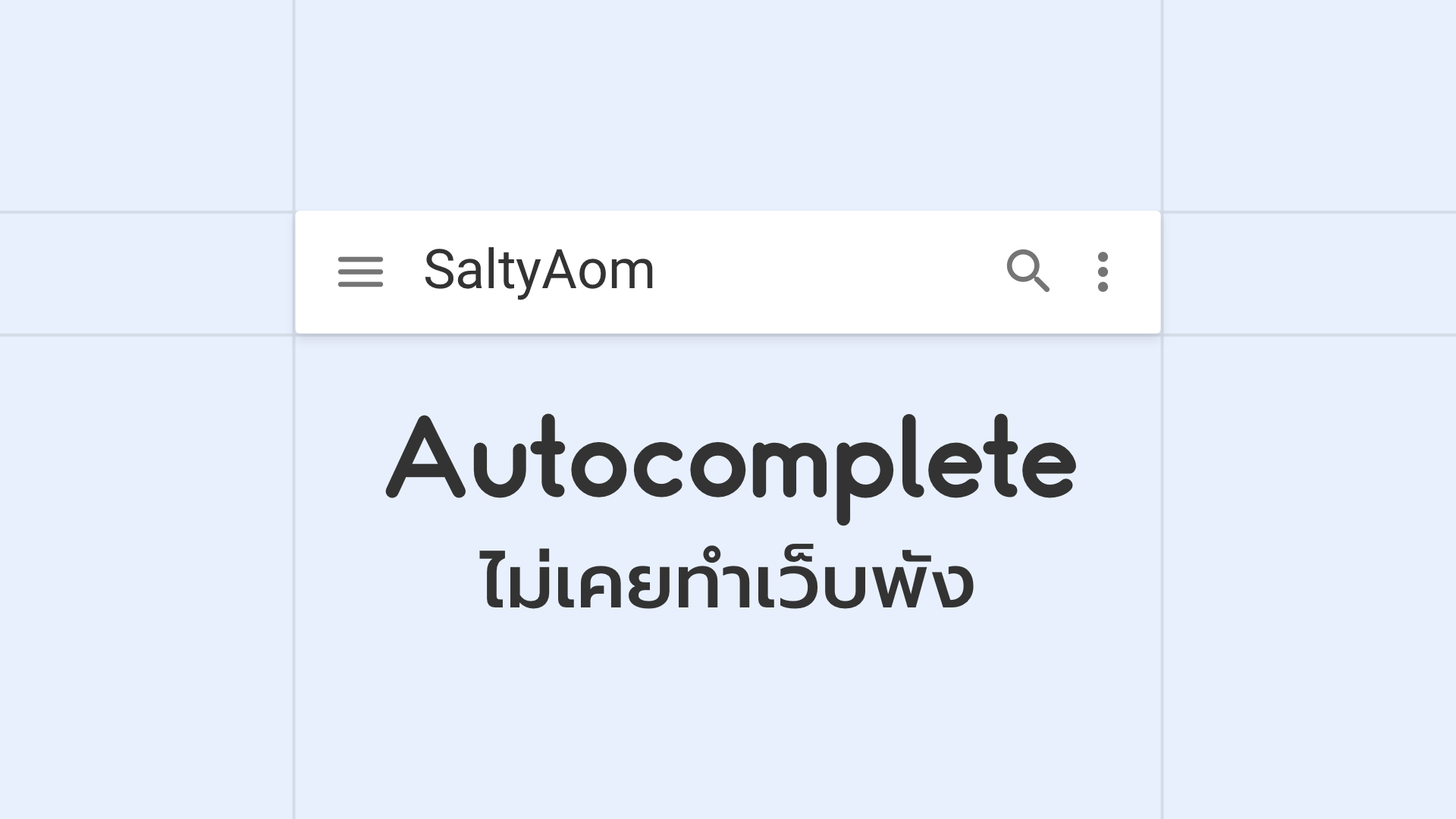
<style>
.page{position:relative;width:1456px;height:819px;background:#e8f0fd}
.page>*{position:absolute;margin:0}
.t1{font:54.6px "Roboto-Regular";color:#333333}
.t2{font:110px "Somatic-Rounded";color:#333333}
.t3{font:75.4px "Prompt-Medium";color:#333333}
</style>
<div class="page">
<p class="t1" style="left:425px;top:247px;width:228px;height:53px">SaltyAom</p>
<p class="t2" style="left:385px;top:413px;width:691px;height:113px">Autocomplete</p>
<p class="t3" style="left:479px;top:544px;width:495px;height:65px">ไม่เคยทำเว็บพัง</p>
</div>
